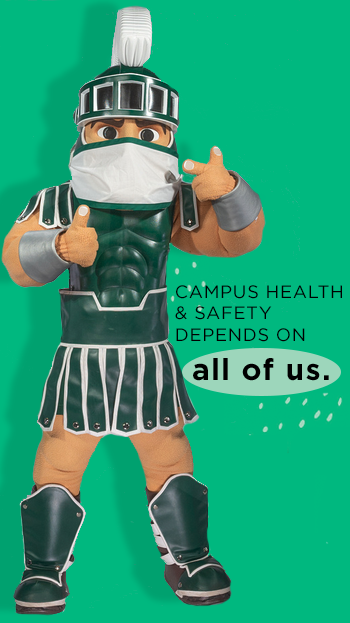
<style>
.page{position:relative;width:350px;height:623px;background:#00b87f}
.page>*{position:absolute;margin:0}
.t1{font:18px "Gotham-Book";letter-spacing:0.04em;color:#000000;text-transform:uppercase}
.t2{font:30px "Gotham-Bold";letter-spacing:0.04em;color:#000000}
</style>
<div class="page">
<p class="t1" style="left:175px;top:285px;width:167px;height:57px">Campus health<br>&amp; safety<br>Depends on</p>
<p class="t2" style="left:193px;top:358px;width:136px;height:23px">all of us.</p>
</div>
